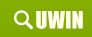
<style>
.page{position:relative;width:92px;height:37px}
.page>*{position:absolute;margin:0}
.t1{font:22px "Impact";color:#ffffff}
</style>
<div class="page">
<p class="t1" style="left:36px;top:11px;width:47px;height:18px">UWIN</p>
</div>
